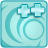
<style>
.page{position:relative;width:48px;height:48px}
.page>*{position:absolute;margin:0}
.t1{font:20px "PlanetKosmos";scale:0.86 1}
</style>
<div class="page">
<p class="t1" style="left:17px;top:5px;width:15px;height:12px">+</p>
<p class="t1" style="left:31px;top:4px;width:14px;height:12px">+</p>
</div>
